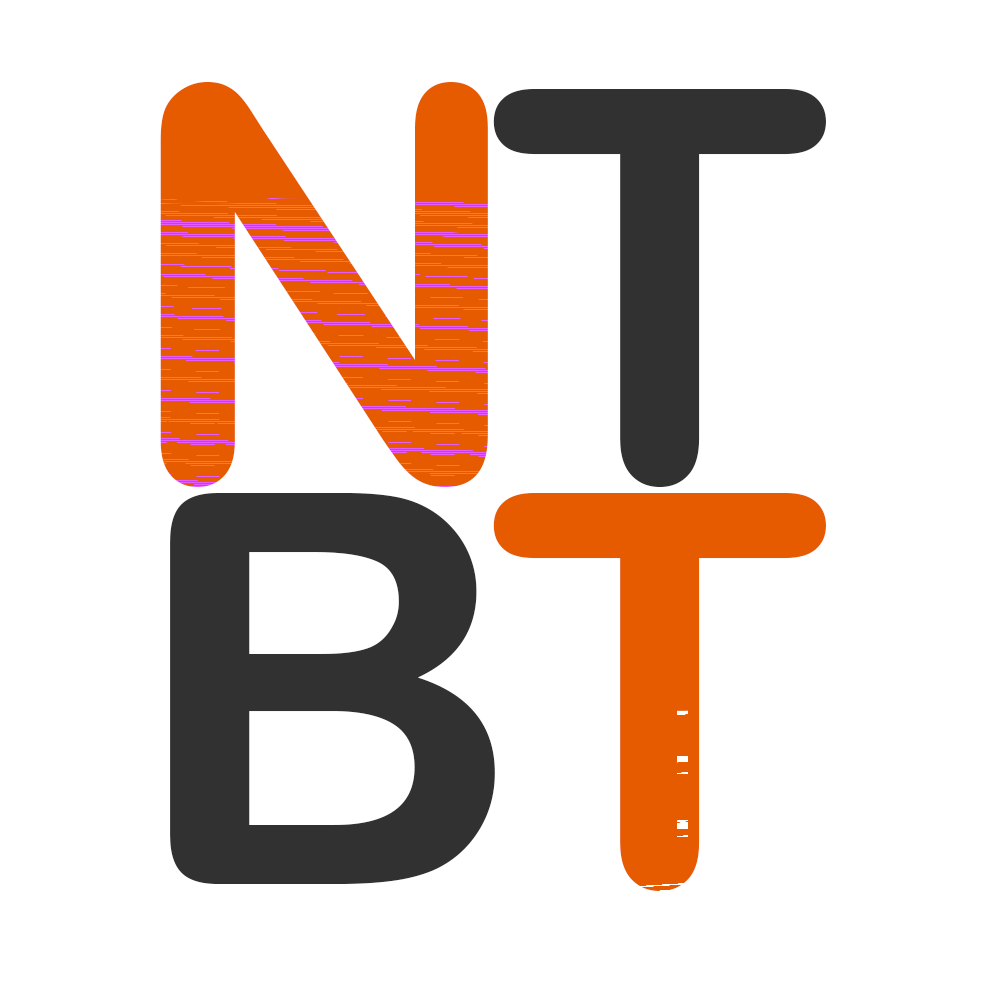
<style>
.page{position:relative;width:1000px;height:1000px;background:#ffffff}
.page>*{position:absolute;margin:0}
.t1{font:545.8px "ArialRoundedMTBold";color:#303130}
.t2{font:545.8px "ArialRoundedMTBold";color:#e65a00}
</style>
<div class="page">
<p class="t1" style="left:493px;top:89px;width:333px;height:398px">T</p>
<p class="t1" style="left:170px;top:493px;width:325px;height:391px">B</p>
<p class="t2" style="left:493px;top:493px;width:333px;height:398px">T</p>
</div>
